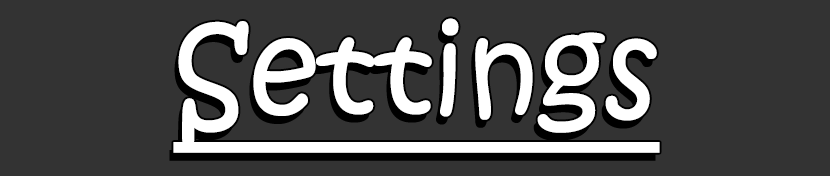
<style>
.page{position:relative;width:830px;height:176px;background:#333333}
.page>*{position:absolute;margin:0}
.t1{font:124.4px "KristenITC-Regular";color:#ffffff;text-decoration:underline}
</style>
<div class="page">
<p class="t1" style="left:173px;top:18px;width:487px;height:135px">Settings</p>
</div>
